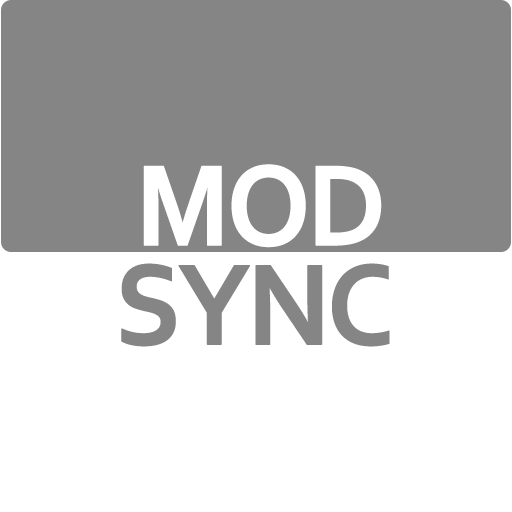
<style>
.page{position:relative;width:512px;height:512px;background:#ffffff}
.page>*{position:absolute;margin:0}
.t1{font:120.7px "Corbel-Bold";letter-spacing:-0.06em;color:#ffffff;font-weight:bold;scale:0.95 1}
.t2{font:120.7px "Corbel-Bold";letter-spacing:-0.06em;color:#858585;font-weight:bold;scale:0.95 1}
</style>
<div class="page">
<p class="t1" style="left:143px;top:164px;width:239px;height:84px">MOD</p>
<p class="t2" style="left:121px;top:263px;width:269px;height:84px">SYNC</p>
</div>
